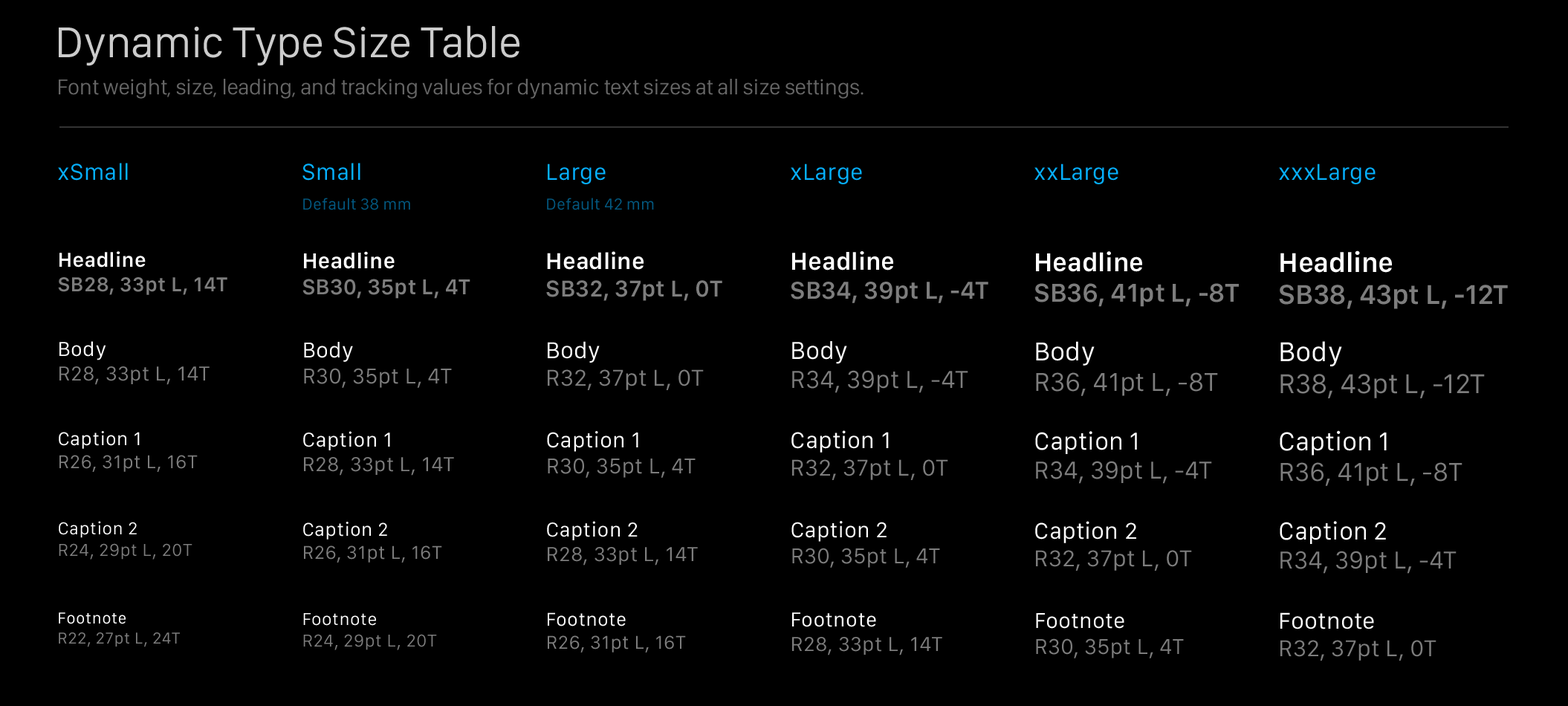
<style>
.page{position:relative;width:1568px;height:706px;background:#000000}
.page>*{position:absolute;margin:0}
.t1{font:44.6px "SanFranciscoDisplay-Regular";letter-spacing:-0.005em;color:#cccccc}
.t2{font:22.3px "SanFranciscoDisplay-Regular";letter-spacing:-0.005em;color:#666666}
.t3{font:23.8px "SanFranciscoText-Regular";color:#06b0ff}
.t4{font:16.3px "SanFranciscoText-Regular";color:#035880}
.t5{font:20.8px/24.5px "SanFranciscoText-Semibold";letter-spacing:0.014em;color:#7d7d7d}
.t6{font:20.8px/24.5px "SanFranciscoText-Semibold";letter-spacing:0.014em;color:#ffffff}
.t7{font:22.3px/26px "SanFranciscoText-Semibold";letter-spacing:0.004em;color:#7d7d7d}
.t8{font:22.3px/26px "SanFranciscoText-Semibold";letter-spacing:0.004em;color:#ffffff}
.t9{font:23.8px/27.5px "SanFranciscoText-Semibold";color:#7d7d7d}
.t10{font:23.8px/27.5px "SanFranciscoText-Semibold";color:#ffffff}
.t11{font:25.3px/29px "SanFranciscoText-Semibold";letter-spacing:-0.004em;color:#7d7d7d}
.t12{font:25.3px/29px "SanFranciscoText-Semibold";letter-spacing:-0.004em;color:#ffffff}
.t13{font:26.8px/30.5px "SanFranciscoText-Semibold";letter-spacing:-0.008em;color:#7d7d7d}
.t14{font:26.8px/30.5px "SanFranciscoText-Semibold";letter-spacing:-0.008em;color:#ffffff}
.t15{font:28.2px/32px "SanFranciscoText-Semibold";letter-spacing:-0.012em;color:#7d7d7d}
.t16{font:28.2px/32px "SanFranciscoText-Semibold";letter-spacing:-0.012em;color:#ffffff}
.t17{font:20.8px/24.5px "SanFranciscoText-Regular";letter-spacing:0.014em;color:#7d7d7d}
.t18{font:20.8px/24.5px "SanFranciscoText-Regular";letter-spacing:0.014em;color:#ffffff}
.t19{font:22.3px/26px "SanFranciscoText-Regular";letter-spacing:0.004em;color:#7d7d7d}
.t20{font:22.3px/26px "SanFranciscoText-Regular";letter-spacing:0.004em;color:#ffffff}
.t21{font:23.8px/27.5px "SanFranciscoText-Regular";color:#7d7d7d}
.t22{font:23.8px/27.5px "SanFranciscoText-Regular";color:#ffffff}
.t23{font:25.3px/29px "SanFranciscoText-Regular";letter-spacing:-0.004em;color:#7d7d7d}
.t24{font:25.3px/29px "SanFranciscoText-Regular";letter-spacing:-0.004em;color:#ffffff}
.t25{font:26.8px/30.5px "SanFranciscoText-Regular";letter-spacing:-0.008em;color:#7d7d7d}
.t26{font:26.8px/30.5px "SanFranciscoText-Regular";letter-spacing:-0.008em;color:#ffffff}
.t27{font:28.2px/32px "SanFranciscoText-Regular";letter-spacing:-0.012em;color:#7d7d7d}
.t28{font:28.2px/32px "SanFranciscoText-Regular";letter-spacing:-0.012em;color:#ffffff}
.t29{font:19.3px/23px "SanFranciscoText-Regular";letter-spacing:0.016em;color:#7d7d7d}
.t30{font:19.3px/23px "SanFranciscoText-Regular";letter-spacing:0.016em;color:#ffffff}
.t31{font:17.8px/21.6px "SanFranciscoText-Regular";letter-spacing:0.02em;color:#7d7d7d}
.t32{font:17.8px/21.6px "SanFranciscoText-Regular";letter-spacing:0.02em;color:#ffffff}
.t33{font:16.3px/20.1px "SanFranciscoText-Regular";letter-spacing:0.024em;color:#7d7d7d}
.t34{font:16.3px/20.1px "SanFranciscoText-Regular";letter-spacing:0.024em;color:#ffffff}
</style>
<div class="page">
<p class="t1" style="left:59px;top:25px;width:460px;height:41px">Dynamic Type Size Table</p>
<p class="t2" style="left:59px;top:79px;width:805px;height:20px">Font weight, size, leading, and tracking values for dynamic text sizes at all size settings.</p>
<p class="t3" style="left:58px;top:163px;width:70px;height:18px">xSmall</p>
<p class="t3" style="left:302px;top:163px;width:58px;height:18px">Small</p>
<p class="t3" style="left:548px;top:163px;width:58px;height:21px">Large</p>
<p class="t3" style="left:791px;top:163px;width:71px;height:21px">xLarge</p>
<p class="t3" style="left:1034px;top:163px;width:84px;height:21px">xxLarge</p>
<p class="t3" style="left:1279px;top:163px;width:97px;height:21px">xxxLarge</p>
<p class="t4" style="left:303px;top:198px;width:107px;height:12px">Default 38 mm</p>
<p class="t4" style="left:547px;top:198px;width:107px;height:12px">Default 42 mm</p>
<p class="t5" style="left:58px;top:251px;width:169px;height:44px"><span class="t6">Headline<br></span>SB28, 33pt L, 14T</p>
<p class="t7" style="left:302px;top:251px;width:168px;height:48px"><span class="t8">Headline<br></span>SB30, 35pt L, 4T</p>
<p class="t9" style="left:546px;top:251px;width:176px;height:50px"><span class="t10">Headline<br></span>SB32, 37pt L, 0T</p>
<p class="t11" style="left:791px;top:251px;width:197px;height:52px"><span class="t12">Headline<br></span>SB34, 39pt L, -4T</p>
<p class="t13" style="left:1034px;top:251px;width:205px;height:56px"><span class="t14">Headline<br></span>SB36, 41pt L, -8T</p>
<p class="t15" style="left:1279px;top:250px;width:229px;height:59px"><span class="t16">Headline<br></span>SB38, 43pt L, -12T</p>
<p class="t17" style="left:59px;top:341px;width:151px;height:44px"><span class="t18">Body<br></span>R28, 33pt L, 14T</p>
<p class="t19" style="left:304px;top:342px;width:148px;height:46px"><span class="t20">Body<br></span>R30, 35pt L, 4T</p>
<p class="t21" style="left:548px;top:341px;width:156px;height:49px"><span class="t22">Body<br></span>R32, 37pt L, 0T</p>
<p class="t23" style="left:792px;top:341px;width:176px;height:52px"><span class="t24">Body<br></span>R34, 39pt L, -4T</p>
<p class="t25" style="left:1036px;top:341px;width:182px;height:55px"><span class="t26">Body<br></span>R36, 41pt L, -8T</p>
<p class="t27" style="left:1280px;top:341px;width:205px;height:57px"><span class="t28">Body<br></span>R38, 43pt L, -12T</p>
<p class="t29" style="left:59px;top:431px;width:139px;height:41px"><span class="t30">Caption 1<br></span>R26, 31pt L, 16T</p>
<p class="t17" style="left:303px;top:431px;width:151px;height:45px"><span class="t18">Caption 1<br></span>R28, 33pt L, 14T</p>
<p class="t19" style="left:547px;top:431px;width:149px;height:47px"><span class="t20">Caption 1<br></span>R30, 35pt L, 4T</p>
<p class="t21" style="left:791px;top:430px;width:157px;height:50px"><span class="t22">Caption 1<br></span>R32, 37pt L, 0T</p>
<p class="t23" style="left:1035px;top:431px;width:177px;height:53px"><span class="t24">Caption 1<br></span>R34, 39pt L, -4T</p>
<p class="t25" style="left:1280px;top:430px;width:182px;height:56px"><span class="t26">Caption 1<br></span>R36, 41pt L, -8T</p>
<p class="t31" style="left:59px;top:521px;width:133px;height:39px"><span class="t32">Caption 2<br></span>R24, 29pt L, 20T</p>
<p class="t29" style="left:303px;top:522px;width:139px;height:41px"><span class="t30">Caption 2<br></span>R26, 31pt L, 16T</p>
<p class="t17" style="left:547px;top:521px;width:151px;height:45px"><span class="t18">Caption 2<br></span>R28, 33pt L, 14T</p>
<p class="t19" style="left:791px;top:521px;width:149px;height:47px"><span class="t20">Caption 2<br></span>R30, 35pt L, 4T</p>
<p class="t21" style="left:1035px;top:521px;width:157px;height:50px"><span class="t22">Caption 2<br></span>R32, 37pt L, 0T</p>
<p class="t23" style="left:1280px;top:521px;width:177px;height:53px"><span class="t24">Caption 2<br></span>R34, 39pt L, -4T</p>
<p class="t33" style="left:59px;top:612px;width:121px;height:35px"><span class="t34">Footnote<br></span>R22, 27pt L, 24T</p>
<p class="t31" style="left:303px;top:613px;width:134px;height:37px"><span class="t32">Footnote<br></span>R24, 29pt L, 20T</p>
<p class="t29" style="left:548px;top:612px;width:138px;height:40px"><span class="t30">Footnote<br></span>R26, 31pt L, 16T</p>
<p class="t17" style="left:792px;top:612px;width:150px;height:43px"><span class="t18">Footnote<br></span>R28, 33pt L, 14T</p>
<p class="t19" style="left:1036px;top:613px;width:148px;height:45px"><span class="t20">Footnote<br></span>R30, 35pt L, 4T</p>
<p class="t21" style="left:1280px;top:612px;width:156px;height:49px"><span class="t22">Footnote<br></span>R32, 37pt L, 0T</p>
</div>
